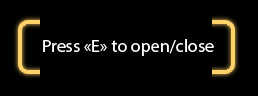
<style>
.page{position:relative;width:258px;height:96px;background:#000000}
.page>*{position:absolute;margin:0}
.t1{font:17.9px "MyriadPro-Regular";color:#ffffff}
</style>
<div class="page">
<p class="t1" style="left:43px;top:39px;width:171px;height:17px">Press «E» to open/close</p>
</div>
